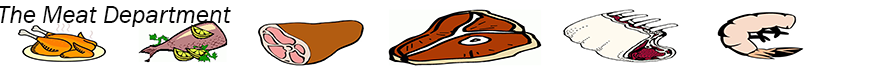
<style>
.page{position:relative;width:881px;height:75px;background:#ffffff}
.page>*{position:absolute;margin:0}
.t1{font:25px "FranklinGothic-BookItalic";color:#060606}
</style>
<div class="page">
<p class="t1" style="left:0px;top:6px;width:231px;height:21px">The Meat Department</p>
</div>
